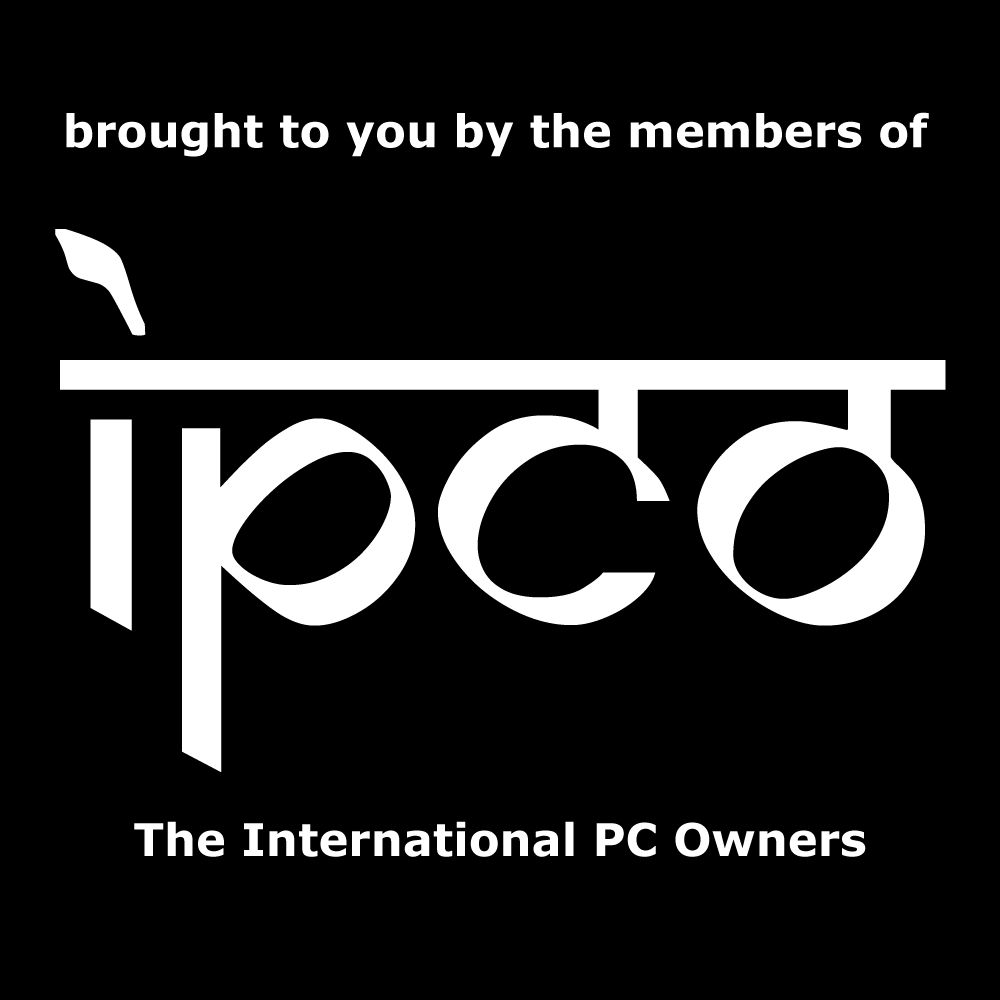
<style>
.page{position:relative;width:1000px;height:1000px;background:#000000}
.page>*{position:absolute;margin:0}
.t1{font:45px "Verdana-Bold";color:#ffffff}
.t2{font:500px "SamarkanNormal";color:#ffffff}
</style>
<div class="page">
<p class="t1" style="left:66px;top:112px;width:863px;height:45px">brought to you by the members of</p>
<p class="t2" style="left:55px;top:229px;width:891px;height:543px">IPCO</p>
<p class="t1" style="left:134px;top:821px;width:732px;height:36px">The International PC Owners</p>
</div>
